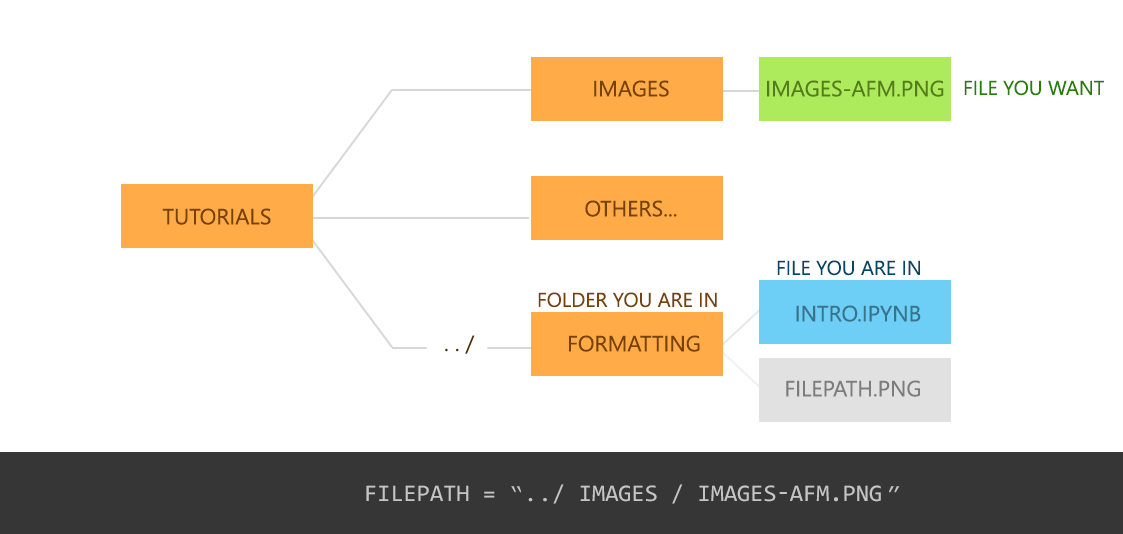
<style>
.page{position:relative;width:1123px;height:534px;background:#ffffff}
.page>*{position:absolute;margin:0}
.t1{font:22px "LeelawadeeUI";color:#764206;text-transform:uppercase}
.t2{font:22px "LeelawadeeUI";color:#537d1a;text-transform:uppercase}
.t3{font:20px "LeelawadeeUI";color:#248000;text-transform:uppercase}
.t4{font:20px "LeelawadeeUI";color:#004865;text-transform:uppercase}
.t5{font:20px "LeelawadeeUI";color:#764206;text-transform:uppercase}
.t6{font:22px "LeelawadeeUI";color:#397289;text-transform:uppercase}
.t7{font:22px "LeelawadeeUI";color:#513008;text-transform:uppercase}
.t8{font:22px "LeelawadeeUI";color:#7c7c7c;text-transform:uppercase}
.t9{font:24px "Consolas";color:#c5c5c5;text-transform:uppercase}
.t10{font:24px "CourierNewPSMT";color:#c5c5c5;text-transform:uppercase}
</style>
<div class="page">
<p class="t1" style="left:594px;top:80px;width:75px;height:17px">ImaGes</p>
<p class="t2" style="left:767px;top:80px;width:177px;height:17px">images-afm.png</p>
<p class="t3" style="left:964px;top:80px;width:140px;height:16px">file you want</p>
<p class="t1" style="left:162px;top:208px;width:109px;height:17px">tutorials</p>
<p class="t1" style="left:585px;top:200px;width:92px;height:17px">Others...</p>
<p class="t4" style="left:777px;top:260px;width:143px;height:16px">File you are in</p>
<p class="t5" style="left:538px;top:292px;width:179px;height:16px">Folder you are in</p>
<p class="t6" style="left:796px;top:305px;width:125px;height:17px">intro.ipynb</p>
<p class="t7" style="left:445px;top:335px;width:30px;height:19px">. . /</p>
<p class="t1" style="left:569px;top:335px;width:131px;height:17px">FORMATTING</p>
<p class="t8" style="left:786px;top:380px;width:134px;height:17px">filepath.png</p>
<p class="t9" style="left:366px;top:484px;width:534px;height:20px">filepath = <span class="t10">“..</span>/ images / images-afm.png <span class="t10">”</span></p>
</div>
